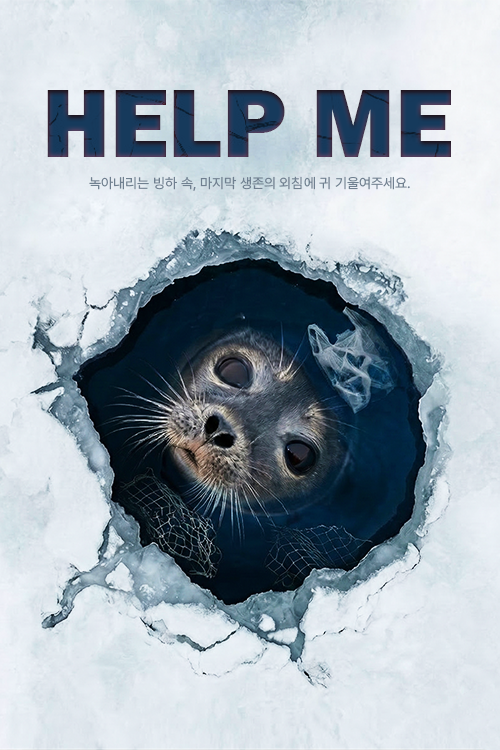
<style>
.page{position:relative;width:500px;height:750px}
.page>*{position:absolute;margin:0}
.t1{font:100px "FranklinGothic-Heavy"}
.t2{font:14px "Pretendard-Regular";color:#708090}
</style>
<div class="page">
<p class="t1" style="left:47px;top:90px;width:404px;height:67px">HELP ME</p>
<p class="t2" style="left:89px;top:176px;width:321px;height:15px">녹아내리는 빙하 속, 마지막 생존의 외침에 귀 기울여주세요.</p>
</div>
